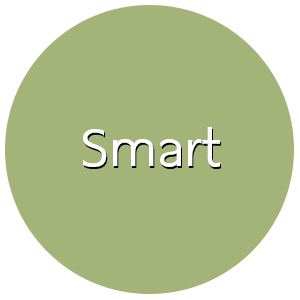
<style>
.page{position:relative;width:300px;height:300px;background:#a4b378}
.page>*{position:absolute;margin:0}
.t1{font:74.1px "ThaiSansLite";color:#ffffff}
</style>
<div class="page">
<p class="t1" style="left:83px;top:127px;width:137px;height:40px">Smart</p>
</div>
